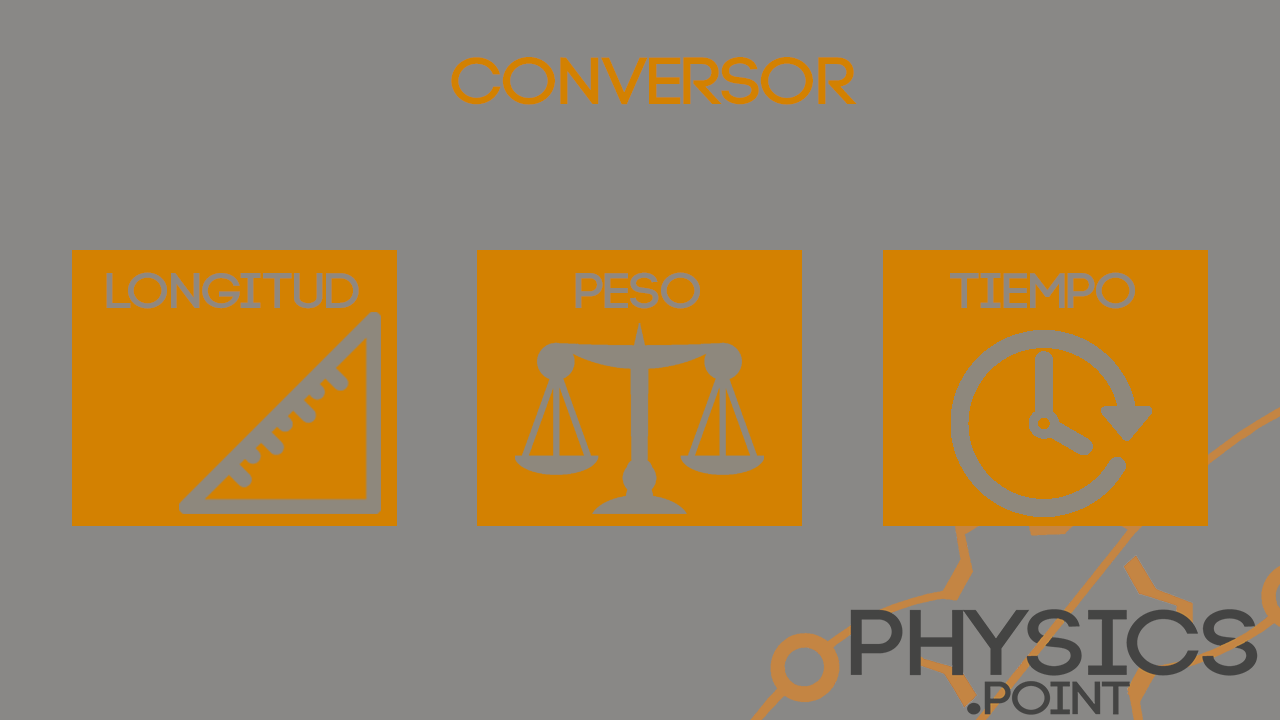
<style>
.page{position:relative;width:1280px;height:720px;background:#898886}
.page>*{position:absolute;margin:0}
.t1{font:66.7px "Code-Bold";color:#d38101;text-transform:uppercase;scale:1.1 1}
.t2{font:50px "Code-Bold";color:#898886;text-transform:uppercase;scale:1.1 1}
</style>
<div class="page">
<p class="t1" style="left:451px;top:57px;width:406px;height:48px">CONVERSOR</p>
<p class="t2" style="left:106px;top:272px;width:253px;height:37px;opacity:0.93">LONGITUD</p>
<p class="t2" style="left:575px;top:272px;width:125px;height:37px;opacity:0.93">PESO</p>
<p class="t2" style="left:950px;top:272px;width:185px;height:37px;opacity:0.93">TIEMPO</p>
</div>
